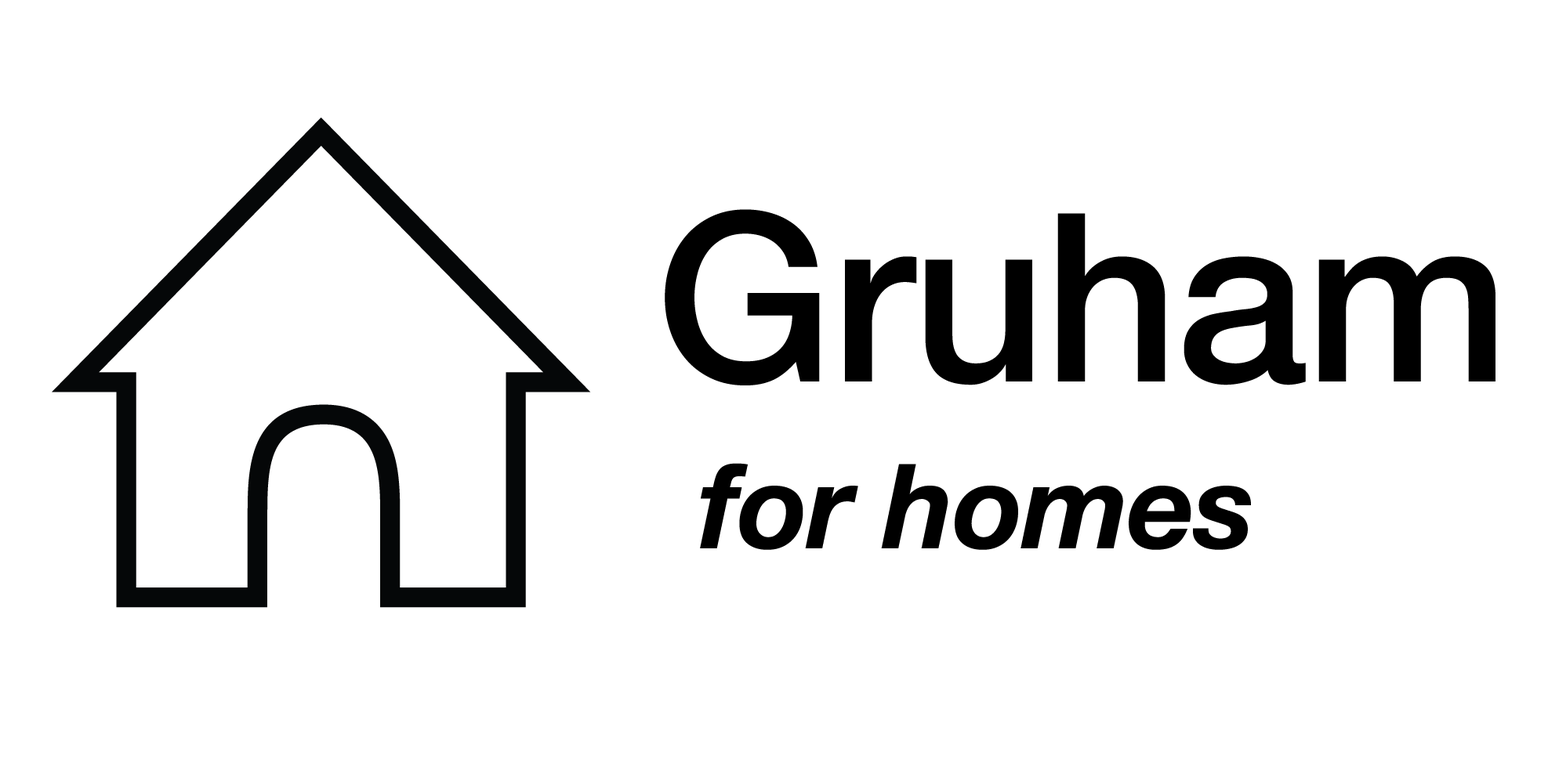
<style>
.page{position:relative;width:1548px;height:770px;background:#ffffff}
.page>*{position:absolute;margin:0}
.t1{font:235.1px "HelveticaNeue-Medium";letter-spacing:-0.01em;color:#000000}
.t2{font:117.6px "HelveticaNeue-BoldItalic";letter-spacing:-0.01em;color:#000000}
</style>
<div class="page">
<p class="t1" style="left:665px;top:209px;width:830px;height:177px">Gruham</p>
<p class="t2" style="left:700px;top:463px;width:551px;height:87px">for homes</p>
</div>
